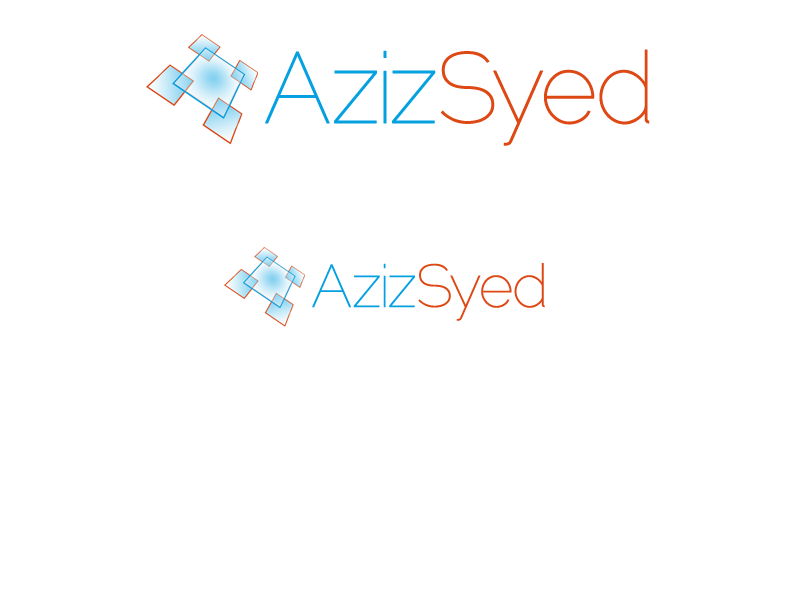
<style>
.page{position:relative;width:800px;height:600px;background:#ffffff}
.page>*{position:absolute;margin:0}
.t1{font:100px "Raleway-Thin";letter-spacing:-0.03em;color:#04a0e0;font-weight:bold}
.t2{font:100px "Raleway-Thin";letter-spacing:-0.03em;color:#dd4814;font-weight:bold}
.t3{font:60px "Raleway-Thin";letter-spacing:-0.03em;color:#04a0e0;font-weight:bold}
.t4{font:60px "Raleway-Thin";letter-spacing:-0.03em;color:#dd4814;font-weight:bold}
</style>
<div class="page">
<p class="t1" style="left:265px;top:49px;width:385px;height:97px">Aziz<span class="t2">Syed</span></p>
<p class="t3" style="left:312px;top:263px;width:233px;height:58px">Aziz<span class="t4">Syed</span></p>
</div>
